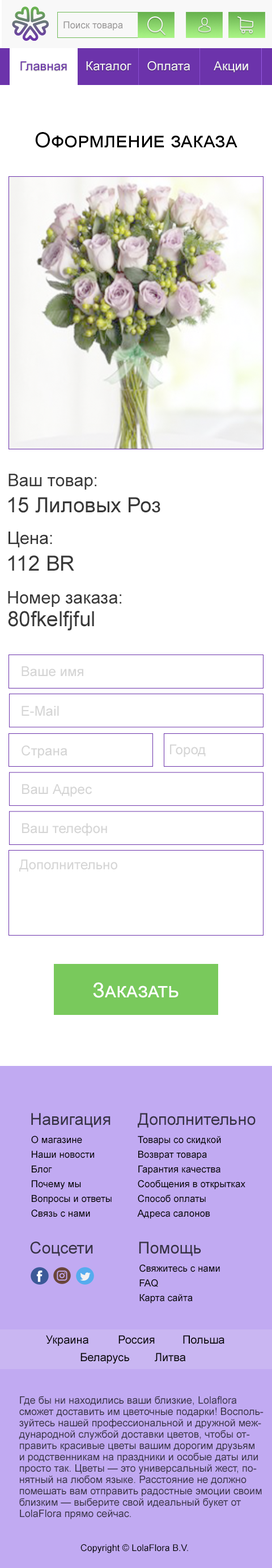
<style>
.page{position:relative;width:272px;height:1568px;background:#ffffff}
.page>*{position:absolute;margin:0}
.t1{font:9.6px "ArialMT";color:#9b9999}
.t2{font:12.3px "ArialMT";color:#6c33ab}
.t3{font:12.3px "ArialMT";color:#e6e6e6}
.t4{font:21px "ArialMT";color:#000000;font-variant:small-caps}
.t5{font:17.4px "ArialMT";color:#383838}
.t6{font:20.9px "ArialMT";color:#383838}
.t7{font:13.7px "ArialMT";color:#d5d5d5}
.t8{font:20.4px "ArialMT";color:#ffffff;font-variant:small-caps}
.t9{font:16.4px "ArialMT";color:#373244}
.t10{font:9.6px/14.7px "ArialMT";color:#000000}
.t11{font:11.3px "ArialMT";color:#000000}
.t12{font:10.2px/11.3px "ArialMT";color:#373244}
.t13{font:9.2px "ArialMT";color:#000000}
</style>
<div class="page">
<p class="t1" style="left:63px;top:21px;width:60px;height:10px">Поиск товара</p>
<p class="t2" style="left:20px;top:61px;width:47px;height:10px">Главная</p>
<p class="t3" style="left:86px;top:61px;width:45px;height:10px">Каталог</p>
<p class="t3" style="left:147px;top:61px;width:43px;height:10px">Оплата</p>
<p class="t3" style="left:214px;top:61px;width:34px;height:12px">Акции</p>
<p class="t4" style="left:35px;top:132px;width:202px;height:16px">Оформление заказа</p>
<p class="t5" style="left:9px;top:474px;width:87px;height:16px">Ваш товар:</p>
<p class="t6" style="left:9px;top:497px;width:151px;height:16px">15 Лиловых Роз</p>
<p class="t5" style="left:9px;top:532px;width:43px;height:15px">Цена:</p>
<p class="t6" style="left:9px;top:555px;width:65px;height:16px">112 BR</p>
<p class="t5" style="left:8px;top:591px;width:113px;height:16px">Номер заказа:</p>
<p class="t6" style="left:8px;top:611px;width:86px;height:20px">80fkelfjful</p>
<p class="t7" style="left:22px;top:666px;width:61px;height:11px">Ваше имя</p>
<p class="t7" style="left:22px;top:706px;width:37px;height:10px">E-Mail</p>
<p class="t7" style="left:22px;top:745px;width:45px;height:13px">Страна</p>
<p class="t7" style="left:170px;top:744px;width:36px;height:13px">Город</p>
<p class="t7" style="left:22px;top:784px;width:70px;height:13px">Ваш Адрес</p>
<p class="t7" style="left:22px;top:823px;width:85px;height:13px">Ваш телефон</p>
<p class="t7" style="left:19px;top:859px;width:98px;height:13px">Дополнительно</p>
<p class="t8" style="left:93px;top:982px;width:86px;height:16px">Заказать</p>
<p class="t9" style="left:31px;top:1113px;width:80px;height:15px">Навигация</p>
<p class="t9" style="left:138px;top:1113px;width:118px;height:15px">Дополнительно</p>
<p class="t10" style="left:31px;top:1136px;width:81px;height:81px">О магазине<br>Наши новости<br>Блог<br>Почему мы <br>Вопросы и ответы<br>Связь с нами</p>
<p class="t10" style="left:137px;top:1136px;width:108px;height:83px">Товары со скидкой<br>Возврат товара<br>Гарантия качества<br>Сообщения в открытках<br>Способ оплаты<br>Адреса салонов</p>
<p class="t9" style="left:30px;top:1242px;width:63px;height:14px">Соцсети</p>
<p class="t9" style="left:139px;top:1242px;width:62px;height:14px">Помощь</p>
<p class="t10" style="left:139px;top:1264px;width:81px;height:39px">Свяжитесь с нами<br>FAQ<br>Карта сайта</p>
<p class="t11" style="left:46px;top:1335px;width:42px;height:11px">Украина</p>
<p class="t11" style="left:118px;top:1335px;width:37px;height:9px">Россия</p>
<p class="t11" style="left:183px;top:1335px;width:41px;height:9px">Польша</p>
<p class="t11" style="left:80px;top:1353px;width:49px;height:11px">Беларусь</p>
<p class="t11" style="left:155px;top:1353px;width:31px;height:9px">Литва</p>
<p class="t12" style="left:19px;top:1396px;width:245px;height:123px">Где бы ни находились ваши близкие, Lolaflora сможет доставить им цветочные подарки! Воспользуйтесь нашей профессиональной и дружной международной службой доставки цветов, чтобы отправить красивые цветы вашим дорогим друзьям и родственникам на праздники и особые даты или просто так. Цветы — это универсальный жест, понятный на любом языке. Расстояние не должно помешать вам отправить радостные эмоции своим близким — выберите свой идеальный букет от LolaFlora прямо сейчас.</p>
<p class="t13" style="left:80px;top:1544px;width:108px;height:9px">Copyright © LolaFlora B.V.</p>
</div>
